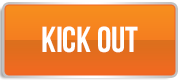
<style>
.page{position:relative;width:180px;height:80px}
.page>*{position:absolute;margin:0}
.t1{font:36px "UTM-Bebas";color:#ffffff}
</style>
<div class="page">
<p class="t1" style="left:42px;top:26px;width:96px;height:27px">kick out</p>
</div>
